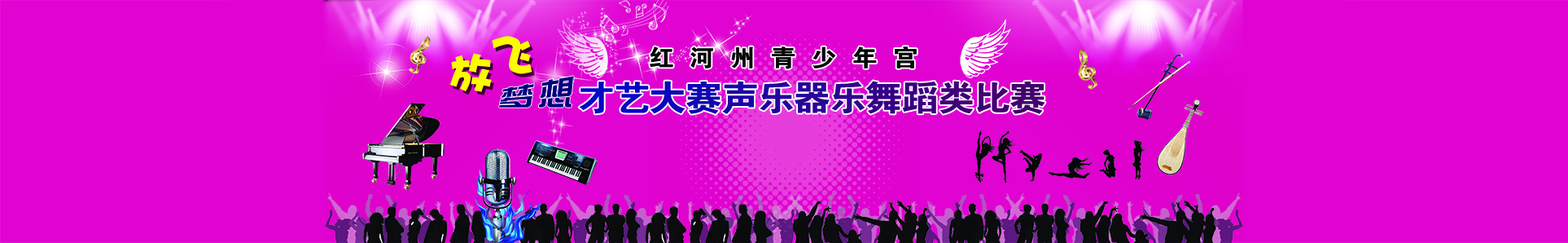
<style>
.page{position:relative;width:1568px;height:243px;background:#e003d2}
.page>*{position:absolute;margin:0}
.t1{font:44.9px "DFPHaiBaoW12";letter-spacing:-0.07em;color:#fcfc00;text-transform:uppercase}
.t2{font:23.7px "FZDHTK--GBK1-0";letter-spacing:0.6em;color:#060808;text-transform:uppercase;scale:1.07 1}
.t3{font:23.7px "FZDHTK--GBK1-0";letter-spacing:-0.05em;color:#060808;text-transform:uppercase;scale:1.07 1}
.t4{font:26.9px "¾­µä×ÛÒÕÌå¼ò-regular";letter-spacing:0.12em;color:#00007a;font-style:italic;scale:1.33 1}
.t5{font:35.3px "FZDHTK--GBK1-0";letter-spacing:-0.05em;text-transform:uppercase;scale:1.07 1}
</style>
<div class="page">
<p class="t1" style="left:492px;top:36px;width:40px;height:38px">飞</p>
<p class="t1" style="left:449px;top:53px;width:43px;height:39px">放</p>
<p class="t2" style="left:650px;top:46px;width:267px;height:23px"><span class="t3">  </span>红河州青少年宫</p>
<p class="t4" style="left:499px;top:76px;width:75px;height:31px;rotate:-5deg">梦想</p>
<p class="t5" style="left:579px;top:81px;width:466px;height:33px">才艺大赛声乐器乐舞蹈类比赛</p>
</div>
